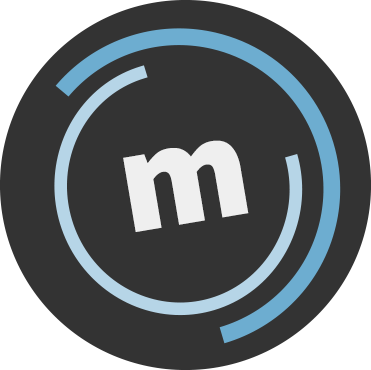
<style>
.page{position:relative;width:371px;height:370px;background:#333333}
.page>*{position:absolute;margin:0}
.t1{font:150px "SourceSansPro-Black";letter-spacing:-0.1em;color:#efefef}
</style>
<div class="page">
<p class="t1" style="left:123px;top:140px;width:126px;height:92px;rotate:-10deg">m</p>
</div>
